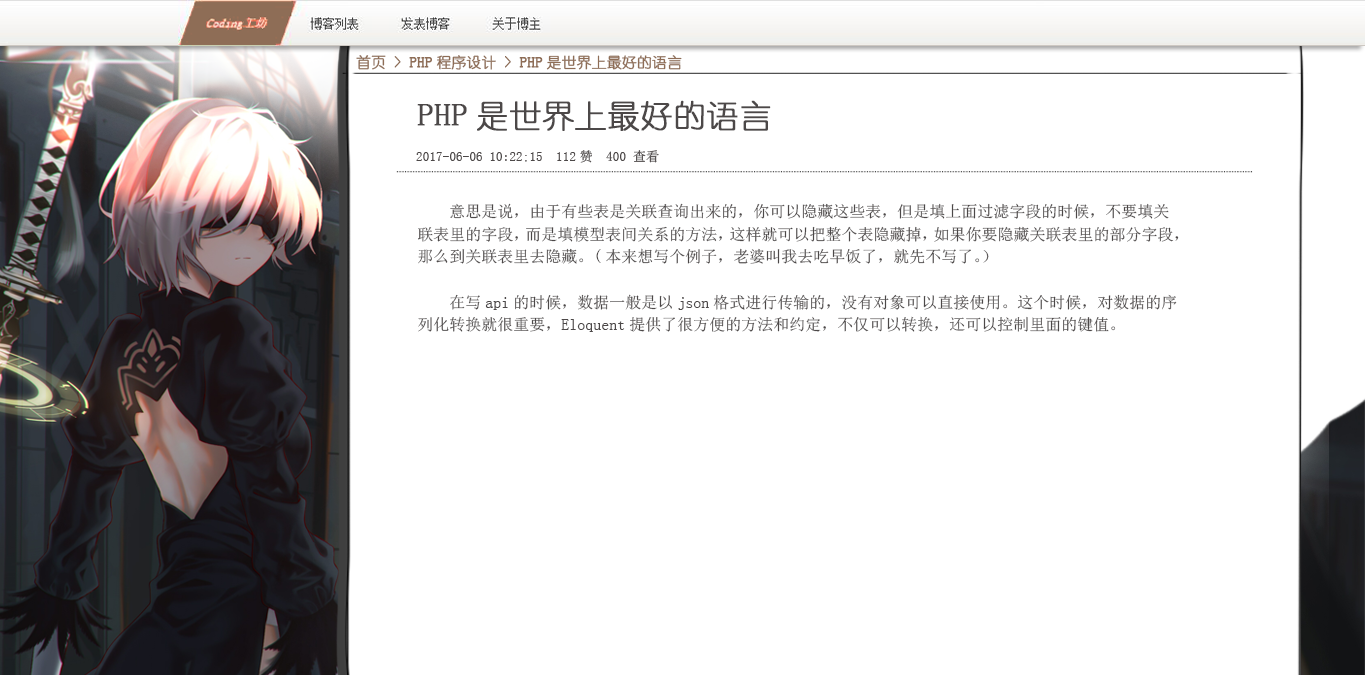
<style>
.page{position:relative;width:1366px;height:675px;background:#ffffff}
.page>*{position:absolute;margin:0}
.t1{font:14.7px "YouYuan";color:#8e6d56;font-weight:bold}
.t2{font:32px "YouYuan";color:#4c4848;font-weight:bold}
.t3{font:16px/22.7px "SimSun";color:#4c4848}
</style>
<div class="page">
<p class="t1" style="left:356px;top:55px;width:326px;height:15px">首页 &gt; PHP程序设计 &gt; PHP是世界上最好的语言</p>
<p class="t2" style="left:417px;top:100px;width:354px;height:31px">PHP是世界上最好的语言</p>
<p class="t3" style="left:418px;top:203px;width:761px;height:129px">意思是说，由于有些表是关联查询出来的，你可以隐藏这些表，但是填上面过滤字段的时候，不要填关联表里的字段，而是填模型表间关系的方法，这样就可以把整个表隐藏掉，如果你要隐藏关联表里的部分字段，那么到关联表里去隐藏。(本来想写个例子，老婆叫我去吃早饭了，就先不写了。）<br><br>    在写api的时候，数据一般是以json格式进行传输的，没有对象可以直接使用。这个时候，对数据的序列化转换就很重要，Eloquent提供了很方便的方法和约定，不仅可以转换，还可以控制里面的键值。</p>
</div>
